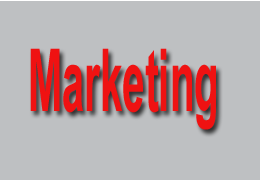
<style>
.page{position:relative;width:260px;height:180px;background:#bec0c2}
.page>*{position:absolute;margin:0}
.t1{font:87.1px "Arial-BoldMT";color:#ef1212;scale:0.46 1}
</style>
<div class="page">
<p class="t1" style="left:30px;top:48px;width:186px;height:82px">Marketing</p>
</div>
